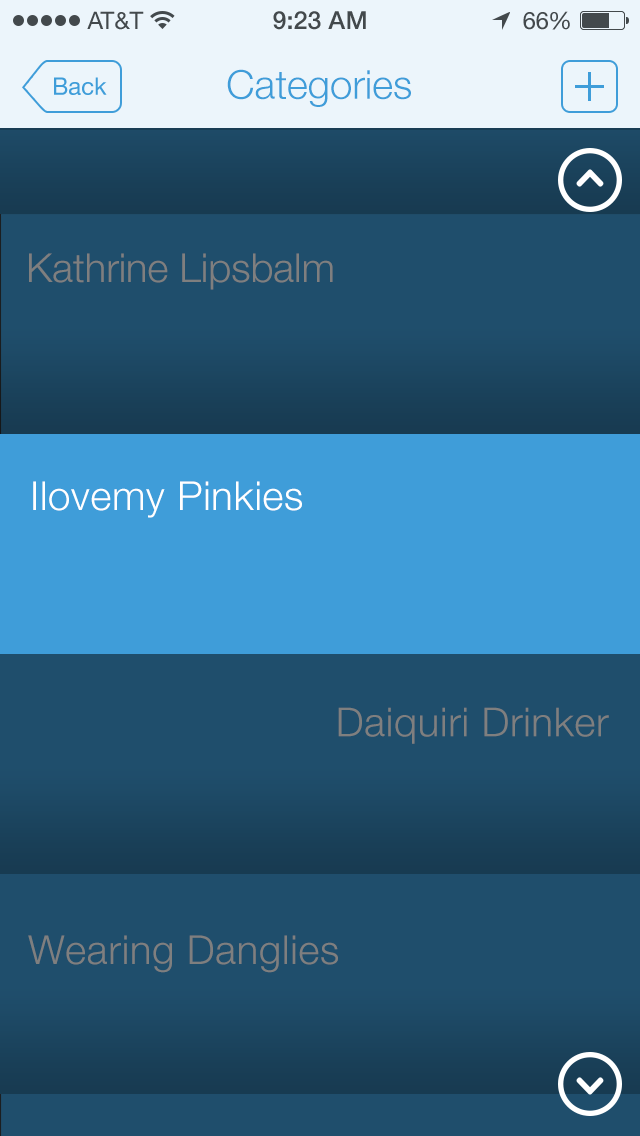
<style>
.page{position:relative;width:640px;height:1136px;background:#1f4e6c}
.page>*{position:absolute;margin:0}
.t1{font:24px "HelveticaNeue";color:#43494c}
.t2{font:25px "HelveticaNeue-Medium";color:#43494c}
.t3{font:24px "HelveticaNeue";letter-spacing:-0.02em;color:#43494c}
.t4{font:24px "HelveticaNeue";color:#3f9dd9}
.t5{font:40px "HelveticaNeue-Light";color:#3f9dd9}
.t6{font:40px "HelveticaNeue-Light";color:#7f7f7f}
.t7{font:40px "HelveticaNeue-Light";letter-spacing:0.02em;color:#ffffff}
.t8{font:40px "HelveticaNeue-Light";letter-spacing:0.02em;color:#7f7f7f}
</style>
<div class="page">
<p class="t1" style="left:87px;top:11px;width:57px;height:19px">AT&amp;T</p>
<p class="t2" style="left:273px;top:11px;width:93px;height:19px">9:23 AM</p>
<p class="t1" style="left:523px;top:11px;width:47px;height:19px">6<span class="t3">6</span>%</p>
<p class="t4" style="left:54px;top:77px;width:53px;height:18px">Back</p>
<p class="t5" style="left:227px;top:69px;width:184px;height:38px">Categories</p>
<p class="t6" style="left:29px;top:253px;width:304px;height:37px">Kathrine Lipsbalm</p>
<p class="t7" style="left:33px;top:481px;width:269px;height:37px">Ilovemy Pinkies</p>
<p class="t8" style="left:338px;top:707px;width:271px;height:37px">Daiquiri Drinker</p>
<p class="t8" style="left:28px;top:935px;width:310px;height:38px">Wearing Danglies</p>
</div>
